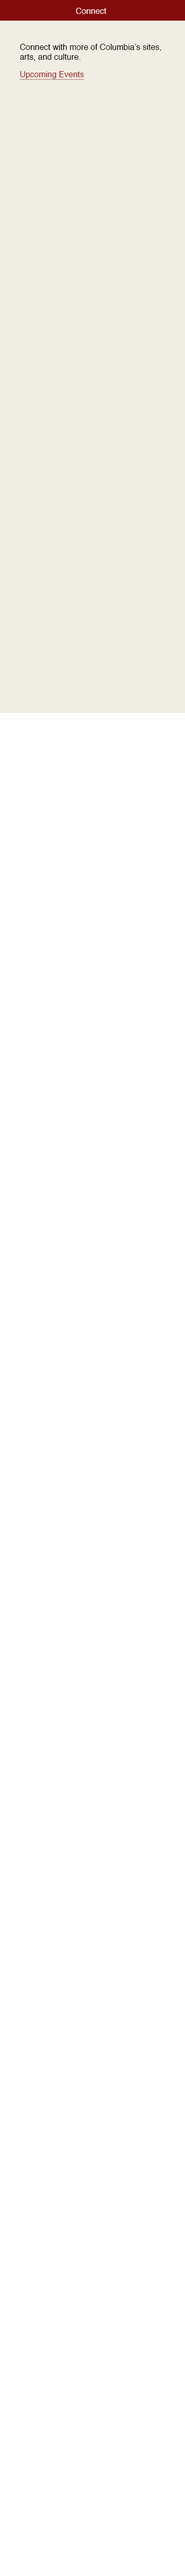
<style>
.page{position:relative;width:185px;height:2576px;background:#ffffff}
.page>*{position:absolute;margin:0}
.t1{font:8.2px "Helvetica";color:#faf6f6}
.t2{font:8.2px "Helvetica";color:#030000}
.t3{font:8.2px "Helvetica";color:#9d1919;text-decoration:underline}
</style>
<div class="page">
<p class="t1" style="left:76px;top:8px;width:31px;height:6px">Connect</p>
<p class="t2" style="left:20px;top:44px;width:142px;height:17px">Connect with more of Columbia’s sites, arts, and culture.</p>
<p class="t3" style="left:20px;top:71px;width:64px;height:9px">Upcoming Events</p>
</div>
